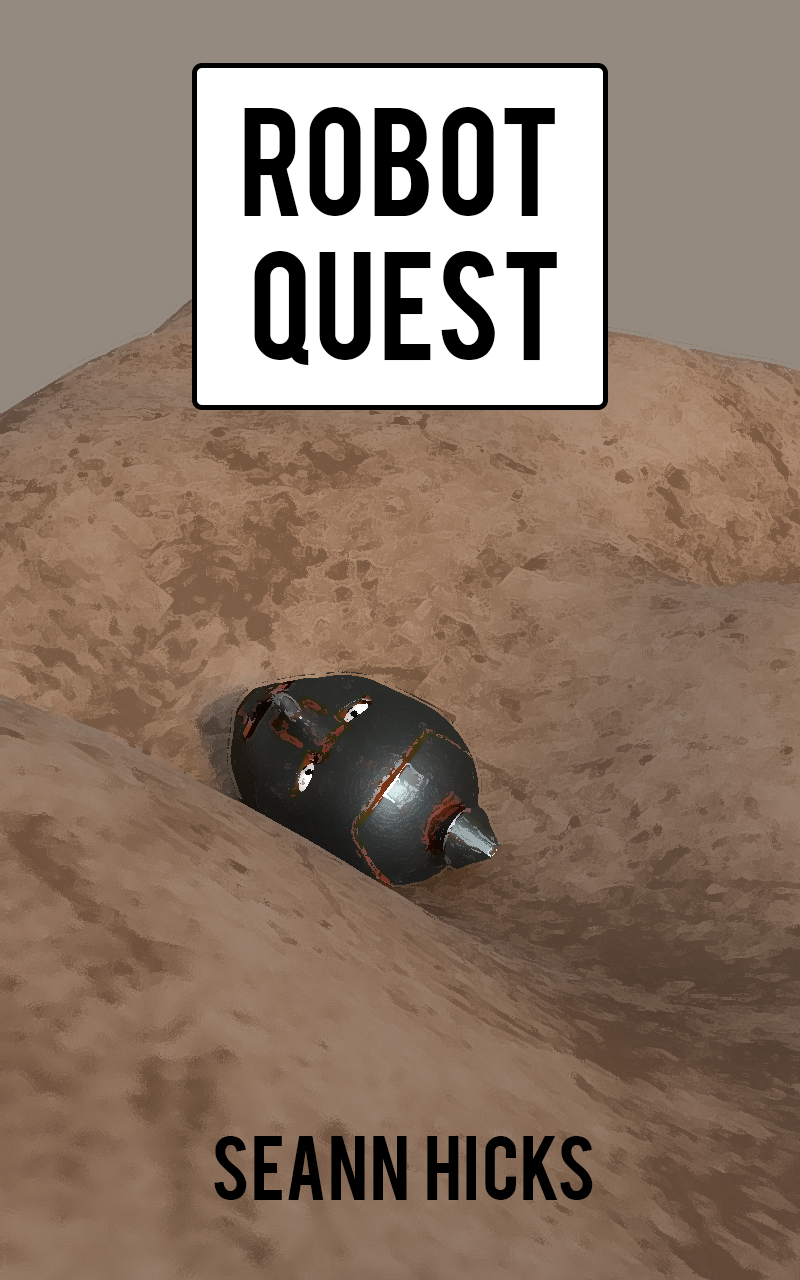
<style>
.page{position:relative;width:800px;height:1280px}
.page>*{position:absolute;margin:0}
.t1{font:120px "Bebas";color:#000000}
.t2{font:72px "Bebas";color:#000000}
</style>
<div class="page">
<p class="t1" style="left:244px;top:107px;width:313px;height:258px;text-align:center">Robot<br> Quest</p>
<p class="t2" style="left:214px;top:1136px;width:379px;height:64px">Seann  Hicks</p>
</div>
